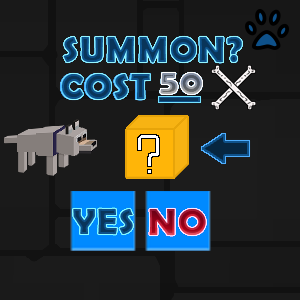
<style>
.page{position:relative;width:300px;height:300px}
.page>*{position:absolute;margin:0}
.t1{font:36px "BerlinSansFBDemi-Bold";letter-spacing:0.05em;text-transform:uppercase}
.t2{font:37.5px "BerlinSansFBDemi-Bold";letter-spacing:0.05em;text-transform:uppercase}
</style>
<div class="page">
<p class="t1" style="left:63px;top:37px;width:179px;height:26px">Summon?</p>
<p class="t1" style="left:63px;top:37px;width:179px;height:26px">Summon?</p>
<p class="t1" style="left:63px;top:37px;width:179px;height:26px">Summon?</p>
<p class="t1" style="left:61px;top:74px;width:88px;height:26px">CoST</p>
<p class="t1" style="left:62px;top:74px;width:88px;height:26px">CoST</p>
<p class="t1" style="left:62px;top:74px;width:88px;height:26px">CoST</p>
<p class="t1" style="left:73px;top:208px;width:60px;height:27px">YES</p>
<p class="t1" style="left:73px;top:208px;width:60px;height:27px">YES</p>
<p class="t1" style="left:73px;top:208px;width:60px;height:27px">YES</p>
<p class="t2" style="left:149px;top:209px;width:57px;height:27px">NO</p>
<p class="t2" style="left:149px;top:209px;width:57px;height:27px">NO</p>
<p class="t2" style="left:149px;top:209px;width:57px;height:27px">NO</p>
<p class="t2" style="left:149px;top:209px;width:57px;height:27px">NO</p>
</div>
